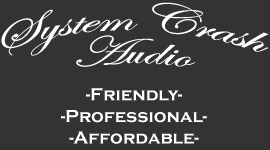
<style>
.page{position:relative;width:270px;height:150px;background:#333333}
.page>*{position:absolute;margin:0}
.t1{font:43px "EdwardianScriptITC";color:#ffffff}
.t2{font:18px "CopperplateGothic-Bold";color:#ffffff}
</style>
<div class="page">
<p class="t1" style="left:1px;top:2px;width:268px;height:54px">System Crash</p>
<p class="t1" style="left:76px;top:35px;width:119px;height:32px">Audio</p>
<p class="t2" style="left:61px;top:87px;width:146px;height:57px;text-align:center">-Friendly-<br>-Professional-<br>-Affordable-</p>
</div>
